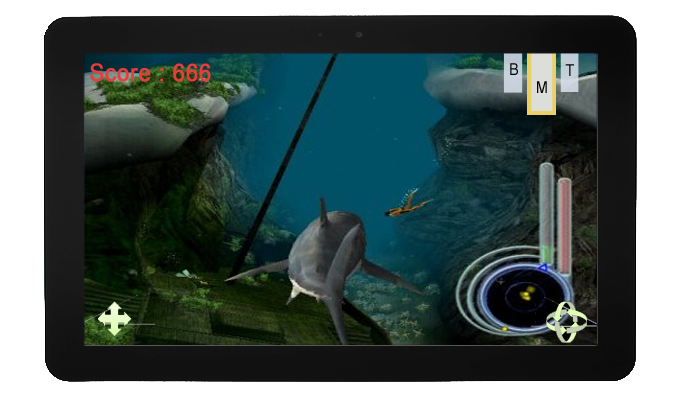
<style>
.page{position:relative;width:680px;height:397px}
.page>*{position:absolute;margin:0}
.t1{font:24.5px "ArialMT";letter-spacing:0.02em;color:#eb3b3b;font-weight:bold;scale:0.89 1}
.t2{font:16.3px "ArialMT";letter-spacing:0.02em;color:#000000;scale:0.89 1}
.t3{font:16.3px "ArialMT";letter-spacing:0.02em;scale:0.89 1}
</style>
<div class="page">
<p class="t1" style="left:90px;top:63px;width:121px;height:19px">Score : 666</p>
<p class="t2" style="left:510px;top:63px;width:8px;height:12px">B</p>
<p class="t3" style="left:565px;top:64px;width:9px;height:12px">T</p>
<p class="t2" style="left:537px;top:81px;width:10px;height:12px">M</p>
</div>
